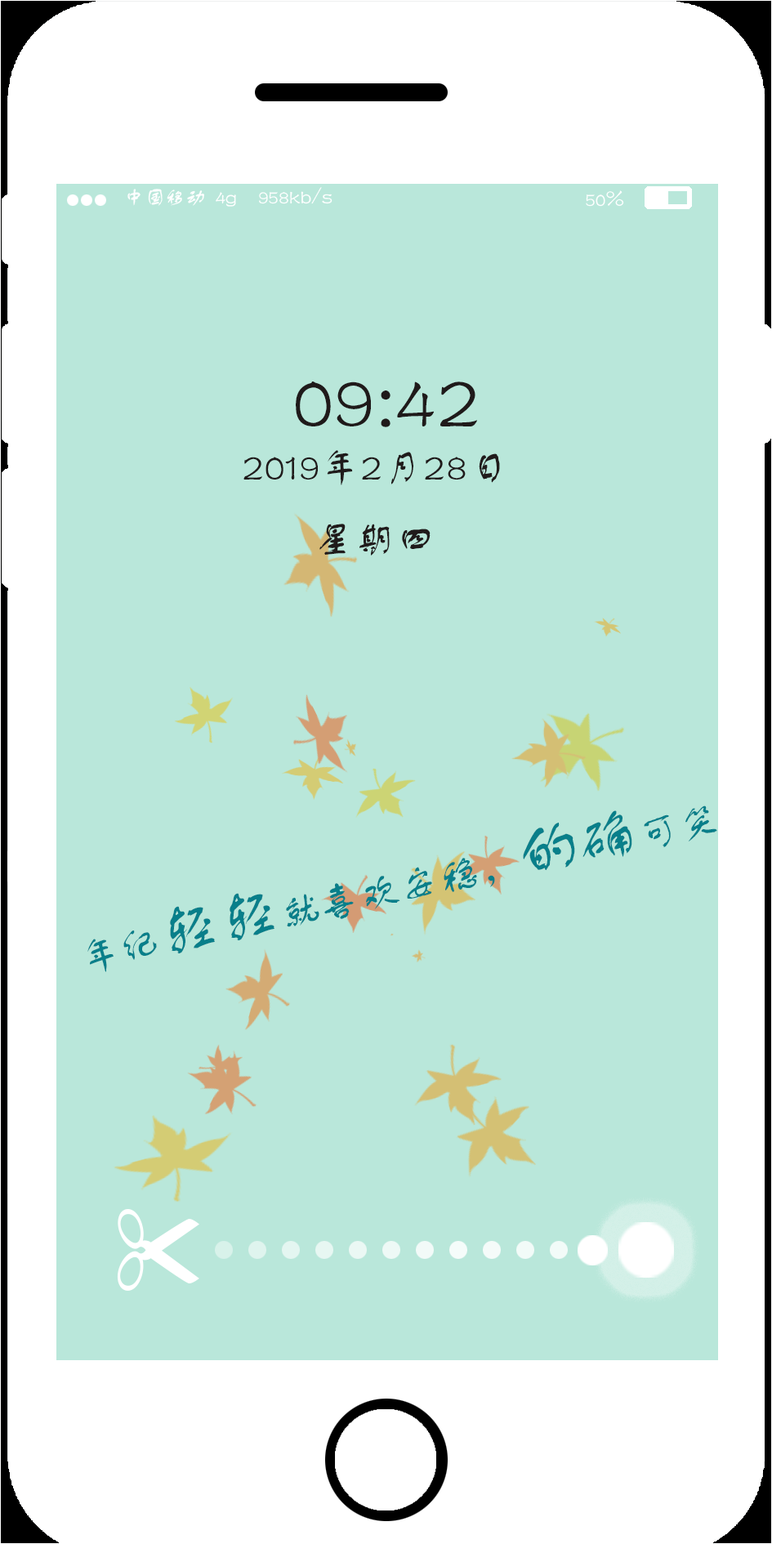
<style>
.page{position:relative;width:772px;height:1544px;background:#b9e7da}
.page>*{position:absolute;margin:0}
.t1{font:81.7px "FZSTK--GBK1-0";color:#201b1b}
.t2{font:40.9px "FZSTK--GBK1-0";color:#201b1b}
.t3{font:40.9px "FZSTK--GBK1-0";color:#087f8a}
.t4{font:61.3px "FZSTK--GBK1-0";color:#087f8a}
</style>
<div class="page">
<p class="t1" style="left:296px;top:382px;width:181px;height:45px">09:42</p>
<p class="t2" style="left:243px;top:450px;width:257px;height:106px">2019年2月28日<br>       星期四</p>
<p class="t3" style="left:87px;top:806px;width:630px;height:166px;rotate:-12deg">年纪<span class="t4">轻轻</span>就喜欢安稳，<span class="t4">的确</span>可笑</p>
</div>
